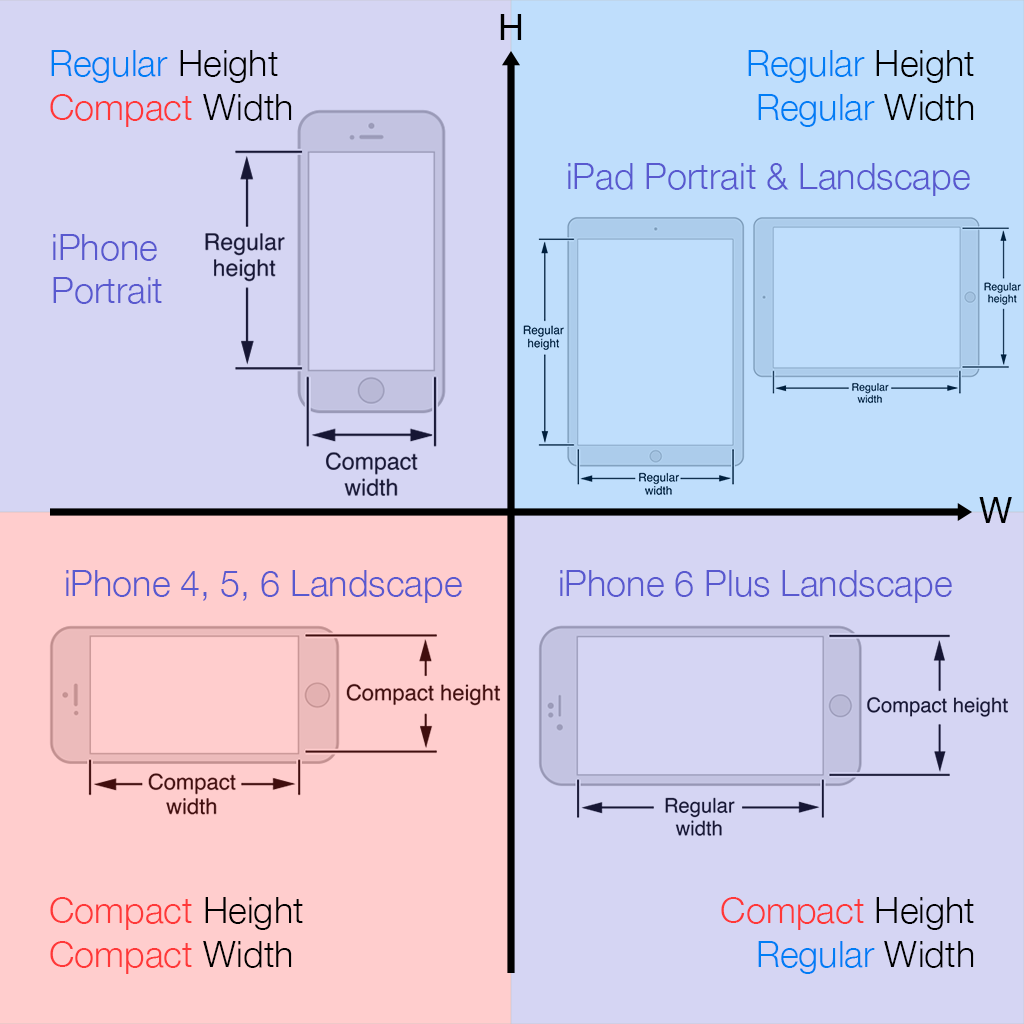
<style>
.page{position:relative;width:1024px;height:1024px;background:#d5d5f3}
.page>*{position:absolute;margin:0}
.t1{font:36px "HelveticaNeue";color:#000000}
.t2{font:36px "HelveticaNeue-Light";color:#007df5}
.t3{font:36px "HelveticaNeue-Light";color:#000000}
.t4{font:36px "HelveticaNeue-Light";color:#ff3838}
.t5{font:36px "HelveticaNeue-Light";color:#5959cf}
</style>
<div class="page">
<p class="t1" style="left:500px;top:14px;width:22px;height:26px">H</p>
<p class="t2" style="left:50px;top:50px;width:242px;height:77px">Regular <span class="t3">Height<br></span><span class="t4">Compact </span><span class="t3">Width</span></p>
<p class="t2" style="left:748px;top:50px;width:226px;height:77px;text-align:right">Regular <span class="t3">Height<br></span>Regular <span class="t3">Width</span></p>
<p class="t5" style="left:568px;top:163px;width:402px;height:33px">iPad Portrait &amp; Landscape</p>
<p class="t5" style="left:53px;top:234px;width:109px;height:70px">iPhone<br>Portrait</p>
<p class="t1" style="left:979px;top:497px;width:33px;height:26px">W</p>
<p class="t5" style="left:66px;top:570px;width:396px;height:33px">iPhone 4, 5, 6 Landscape</p>
<p class="t5" style="left:560px;top:570px;width:392px;height:33px">iPhone 6 Plus Landscape</p>
<p class="t4" style="left:50px;top:897px;width:253px;height:77px">Compact <span class="t3">Height<br></span>Compact <span class="t3">Width</span></p>
<p class="t4" style="left:721px;top:897px;width:253px;height:77px;text-align:right">Compact <span class="t3">Height<br></span><span class="t2">Regular </span><span class="t3">Width</span></p>
</div>
